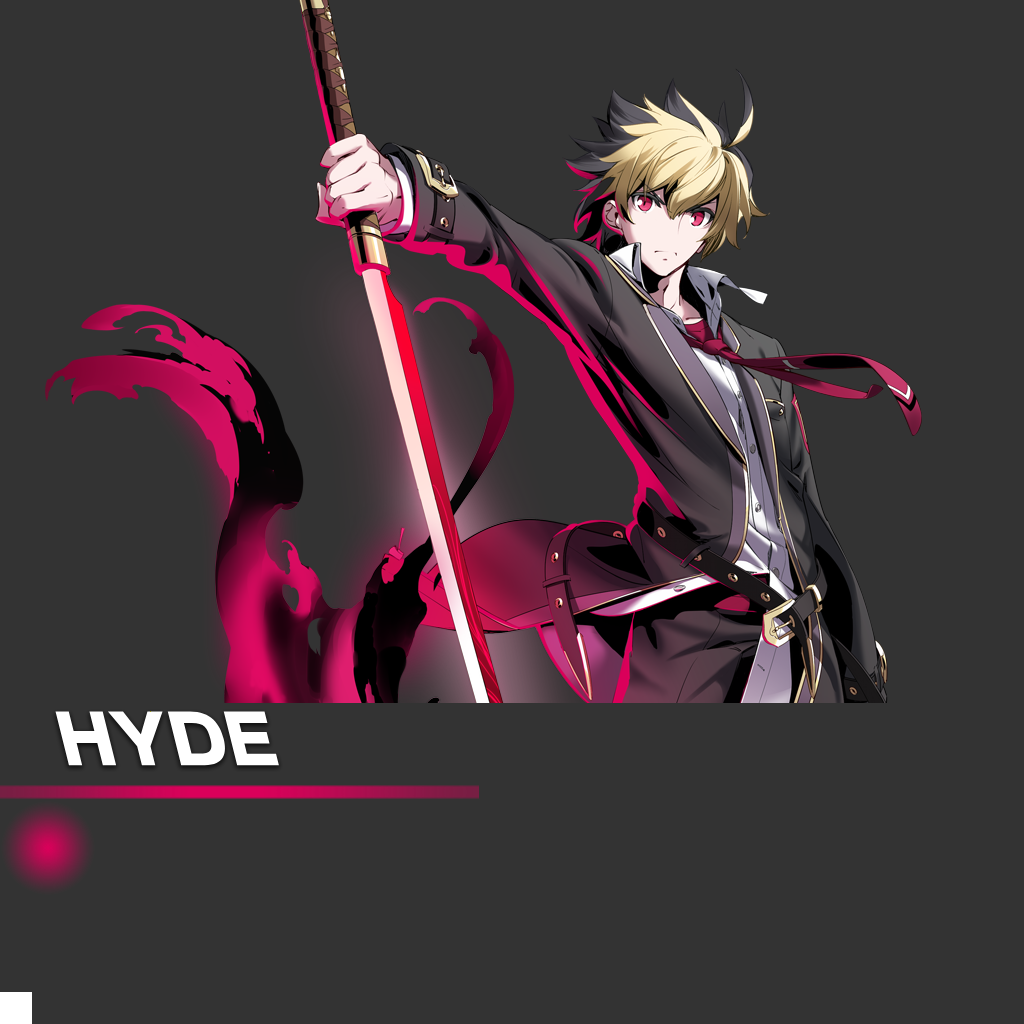
<style>
.page{position:relative;width:1024px;height:1024px;background:#333333}
.page>*{position:absolute;margin:0}
.t1{font:70.1px "NewCezannePro-EB";letter-spacing:0.006em;color:#ffffff;scale:0.92 1}
</style>
<div class="page">
<p class="t1" style="left:55px;top:711px;width:224px;height:55px">HYDE</p>
</div>
